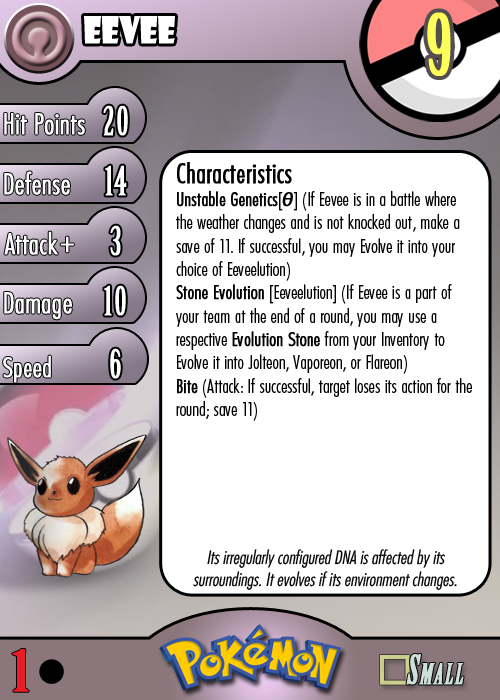
<style>
.page{position:relative;width:500px;height:700px;background:#ffffff}
.page>*{position:absolute;margin:0}
.t1{font:36.7px "ShowcardGothic-Reg";letter-spacing:-0.025em;color:#ffffff;scale:0.91 1}
.t2{font:83.3px "BirchStd";letter-spacing:0.025em;color:#fffd59;font-weight:bold}
.t3{font:27.8px "Futura-CondensedLight";color:#ffffff;font-weight:bold}
.t4{font:38.9px "BirchStd";letter-spacing:0.035em;color:#ffffff;font-weight:bold}
.t5{font:19.4px "FuturaCondensedBQ-Light";color:#010101}
.t6{font:27.8px "FuturaCondensedBQ-Light";color:#010101;font-weight:bold}
.t7{font:19.4px "FuturaCondensedBQ-Light";color:#010101;font-weight:bold}
.t8{font:19.4px "FuturaCondensedBQ-Light";letter-spacing:-0.05em;color:#010101}
.t9{font:19.4px "MyriadPro-Regular";letter-spacing:0.1em;color:#010101;font-weight:bold;font-style:italic}
.t10{font:30.6px "Futura-CondensedLight";color:#ffffff;font-weight:bold}
.t11{font:27.8px "FuturaCondensedBQ-Light";color:#ffffff;font-weight:bold}
.t12{font:18.1px "Futura-CondensedLight";color:#010101;font-style:italic}
.t13{font:55.6px "BirchStd";color:#ed1c24;font-weight:bold;scale:1.5 1}
</style>
<div class="page">
<p class="t1" style="left:84px;top:16px;width:91px;height:28px">eevee</p>
<p class="t2" style="left:427px;top:12px;width:24px;height:64px">9</p>
<p class="t3" style="left:4px;top:113px;width:81px;height:22px">Hit Points</p>
<p class="t4" style="left:103px;top:105px;width:25px;height:31px">20</p>
<p class="t3" style="left:4px;top:171px;width:66px;height:24px">Defense</p>
<p class="t4" style="left:105px;top:165px;width:22px;height:31px">14</p>
<p class="t5" style="left:176px;top:162px;width:296px;height:259px"><span class="t6">Characteristics<br></span><span class="t7">Unstable Genetics</span><span class="t8">[</span><span class="t9">θ</span>] (If Eevee is in a battle where the weather changes and is not knocked out, make a save of 11. If successful, you may Evolve it into your choice of Eeveelution)<br><span class="t7">Stone Evolution</span> [Eeveelution] (If Eevee is a part of your team at the end of a round, you may use a respective <span class="t7">Evolution Stone</span> from your Inventory to Evolve it into Jolteon, Vaporeon, or Flareon)<br><span class="t7">Bite</span> (Attack: If successful, target loses its action for the round; save 11)</p>
<p class="t3" style="left:4px;top:231px;width:54px;height:24px">Attack</p>
<p class="t4" style="left:110px;top:225px;width:11px;height:31px">3</p>
<p class="t10" style="left:60px;top:236px;width:14px;height:17px">+</p>
<p class="t3" style="left:4px;top:292px;width:68px;height:28px">Damage</p>
<p class="t4" style="left:104px;top:285px;width:22px;height:31px">10</p>
<p class="t4" style="left:110px;top:348px;width:11px;height:31px">6</p>
<p class="t11" style="left:3px;top:355px;width:48px;height:28px">Speed</p>
<p class="t12" style="left:193px;top:549px;width:264px;height:41px;text-align:center">Its irregularly configured DNA is affected by its surroundings. It evolves if its environment changes.</p>
<p class="t13" style="left:12px;top:649px;width:17px;height:43px">1</p>
</div>
